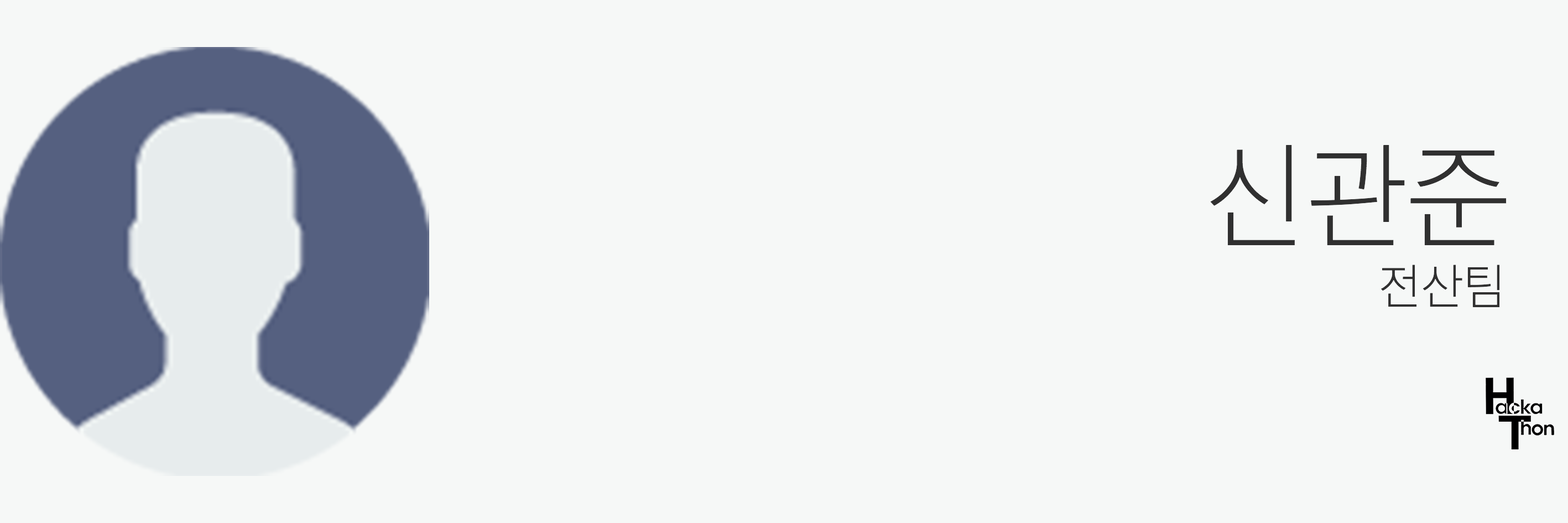
<style>
.page{position:relative;width:1568px;height:523px;background:#f6f8f7}
.page>*{position:absolute;margin:0}
.t1{font:110.6px "SECGCOTFUL";letter-spacing:0.02em;color:#303030}
.t2{font:46.1px "SECGCOTFUL";letter-spacing:0.02em;color:#303030}
</style>
<div class="page">
<p class="t1" style="left:1210px;top:145px;width:297px;height:100px">신관준</p>
<p class="t2" style="left:1381px;top:264px;width:119px;height:43px">전산팀</p>
</div>
